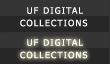
<style>
.page{position:relative;width:110px;height:64px;background:#353535}
.page>*{position:absolute;margin:0}
.t1{font:8.8px "Tahoma";letter-spacing:0.13em;color:#ffffff;font-variant:small-caps}
</style>
<div class="page">
<p class="t1" style="left:27px;top:7px;width:56px;height:7px">UF DIGITAL</p>
<p class="t1" style="left:20px;top:19px;width:68px;height:8px">COLLECTIONS</p>
</div>
